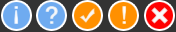
<style>
.page{position:relative;width:176px;height:32px;background:#333333}
.page>*{position:absolute;margin:0}
.t1{font:25px "CTCuYuanSF";letter-spacing:0.1em;color:#e8f1fd}
.t2{font:25px "CTCuYuanSF";letter-spacing:0.1em;color:#eaf0f7}
.t3{font:25px "CTCuYuanSF";letter-spacing:0.1em}
</style>
<div class="page">
<p class="t1" style="left:14px;top:6px;width:5px;height:18px">!</p>
<p class="t2" style="left:45px;top:6px;width:13px;height:18px">?</p>
<p class="t3" style="left:122px;top:6px;width:5px;height:18px">!</p>
</div>
